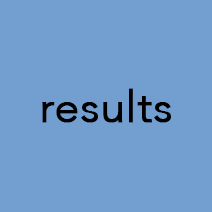
<style>
.page{position:relative;width:212px;height:212px;background:#729fcf}
.page>*{position:absolute;margin:0}
.t1{font:43.8px "Avenir-Light";color:#000000;font-weight:bold}
</style>
<div class="page">
<p class="t1" style="left:42px;top:88px;width:129px;height:35px">results</p>
</div>
